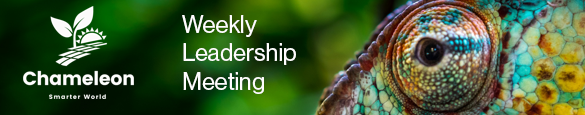
<style>
.page{position:relative;width:585px;height:115px}
.page>*{position:absolute;margin:0}
.t1{font:24px "NHaasGroteskDSPro-55Rg";color:#fefdfd}
</style>
<div class="page">
<p class="t1" style="left:182px;top:15px;width:114px;height:79px">Weekly<br>Leadership<br>Meeting</p>
</div>
